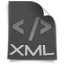
<style>
.page{position:relative;width:64px;height:64px;background:#ffffff}
.page>*{position:absolute;margin:0}
.t1{font:14.4px "PirulenRg-Regular";color:#c2c2c2}
</style>
<div class="page">
<p class="t1" style="left:9px;top:44px;width:46px;height:12px">XML</p>
</div>
